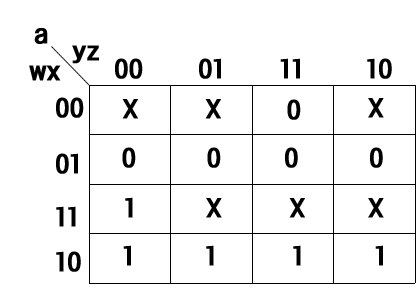
<style>
.page{position:relative;width:420px;height:290px;background:#ffffff}
.page>*{position:absolute;margin:0}
.t1{font:24px "KoreanSWGI2-R";color:#000000;font-weight:bold}
</style>
<div class="page">
<p class="t1" style="left:34px;top:28px;width:14px;height:16px">a</p>
<p class="t1" style="left:72px;top:45px;width:27px;height:19px">yz</p>
<p class="t1" style="left:29px;top:65px;width:32px;height:16px">wx</p>
<p class="t1" style="left:115px;top:58px;width:277px;height:21px">00       01       11        10</p>
<p class="t1" style="left:56px;top:97px;width:28px;height:175px">00<br><br>01<br><br>11<br><br>10</p>
<p class="t1" style="left:122px;top:99px;width:99px;height:20px">X         X</p>
<p class="t1" style="left:287px;top:99px;width:14px;height:21px">0</p>
<p class="t1" style="left:368px;top:98px;width:16px;height:20px">X</p>
<p class="t1" style="left:122px;top:147px;width:261px;height:21px">0         0        0         0</p>
<p class="t1" style="left:125px;top:197px;width:8px;height:21px">1</p>
<p class="t1" style="left:206px;top:198px;width:178px;height:20px">X         X        X</p>
<p class="t1" style="left:123px;top:245px;width:260px;height:21px">1         1          1         1</p>
</div>
